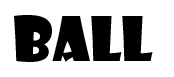
<style>
.page{position:relative;width:174px;height:77px;background:#ffffff}
.page>*{position:absolute;margin:0}
.t1{font:60px "ShowcardGothic-Reg";color:#000000}
</style>
<div class="page">
<p class="t1" style="left:14px;top:15px;width:139px;height:47px">BALL</p>
</div>
